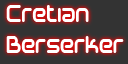
<style>
.page{position:relative;width:128px;height:64px;background:#333333}
.page>*{position:absolute;margin:0}
.t1{font:26px "SciFied2002";color:#ffffff;scale:0.8 1}
</style>
<div class="page">
<p class="t1" style="left:6px;top:5px;width:118px;height:48px">Cretian<br>Berserker</p>
</div>
